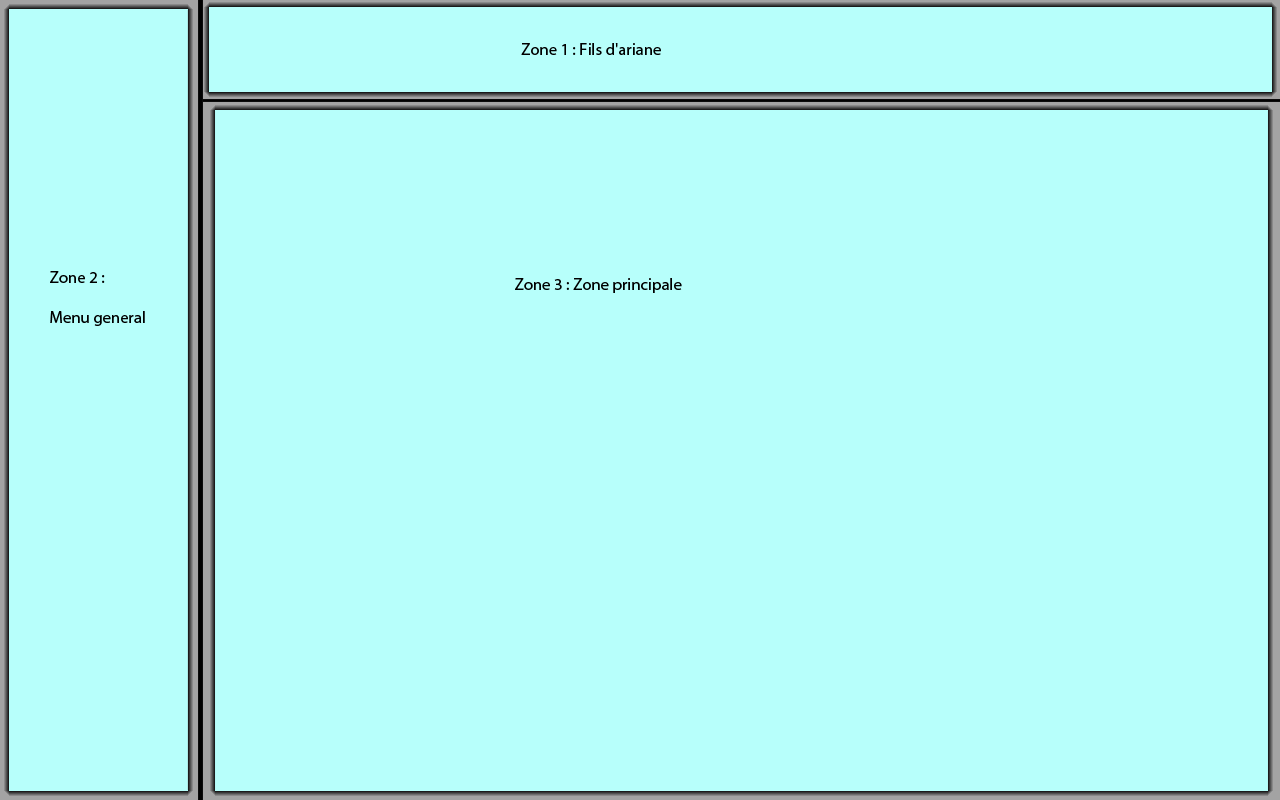
<style>
.page{position:relative;width:1280px;height:800px;background:#b7fffb}
.page>*{position:absolute;margin:0}
.t1{font:16.7px "MyriadPro-Regular";color:#000000}
</style>
<div class="page">
<p class="t1" style="left:50px;top:271px;width:95px;height:55px">Zone 2 :<br><br>Menu general</p>
<p class="t1" style="left:515px;top:278px;width:167px;height:15px">Zone 3 : Zone principale</p>
</div>
